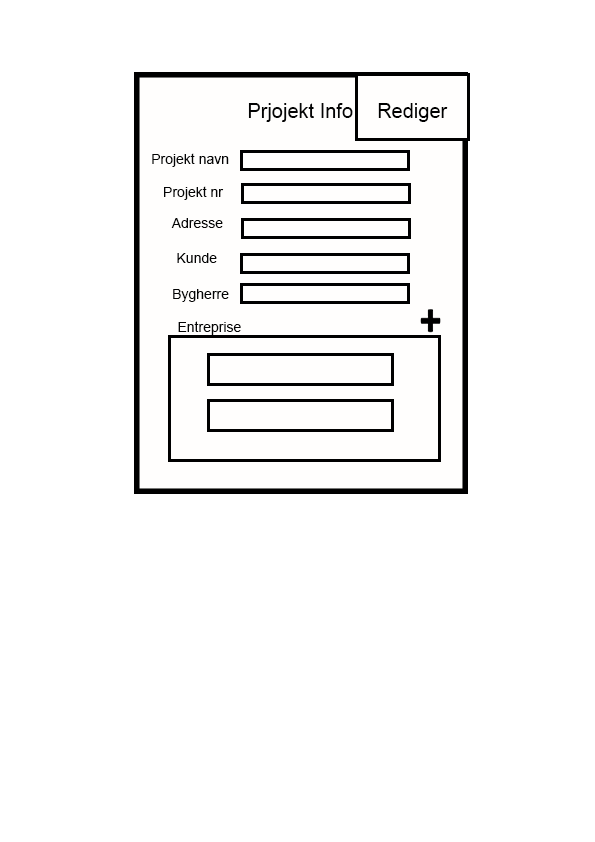
<style>
.page{position:relative;width:595px;height:842px;background:#ffffff}
.page>*{position:absolute;margin:0}
.t1{font:20px "ArialMT";color:#040404}
.t2{font:20px "ArialMT";color:#000000}
.t3{font:14px "ArialMT";color:#040404}
</style>
<div class="page">
<p class="t1" style="left:248px;top:103px;width:105px;height:19px">Prjojekt Info</p>
<p class="t2" style="left:378px;top:103px;width:70px;height:19px">Rediger</p>
<p class="t3" style="left:152px;top:153px;width:77px;height:14px">Projekt navn</p>
<p class="t3" style="left:164px;top:186px;width:60px;height:14px">Projekt nr</p>
<p class="t3" style="left:171px;top:218px;width:52px;height:10px">Adresse</p>
<p class="t3" style="left:177px;top:253px;width:40px;height:10px">Kunde</p>
<p class="t3" style="left:173px;top:289px;width:56px;height:13px">Bygherre</p>
<p class="t3" style="left:178px;top:321px;width:63px;height:14px">Entreprise</p>
</div>
